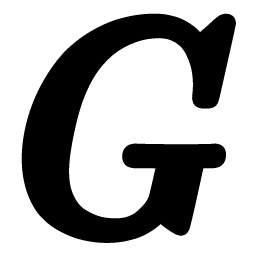
<style>
.page{position:relative;width:256px;height:256px;background:#ffffff}
.page>*{position:absolute;margin:0}
.t1{font:300px "CMUSerif-BoldItalic";letter-spacing:0.05em;color:#000000;scale:0.91 1}
</style>
<div class="page">
<p class="t1" style="left:26px;top:18px;width:205px;height:220px">G</p>
</div>
